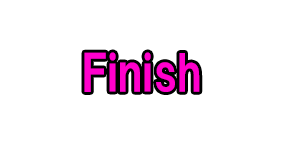
<style>
.page{position:relative;width:283px;height:142px;background:#ffffff}
.page>*{position:absolute;margin:0}
.t1{font:48px "HGSSoeiKakugothicUB";color:#ff00cc}
</style>
<div class="page">
<p class="t1" style="left:84px;top:52px;width:116px;height:40px">Finish</p>
</div>
